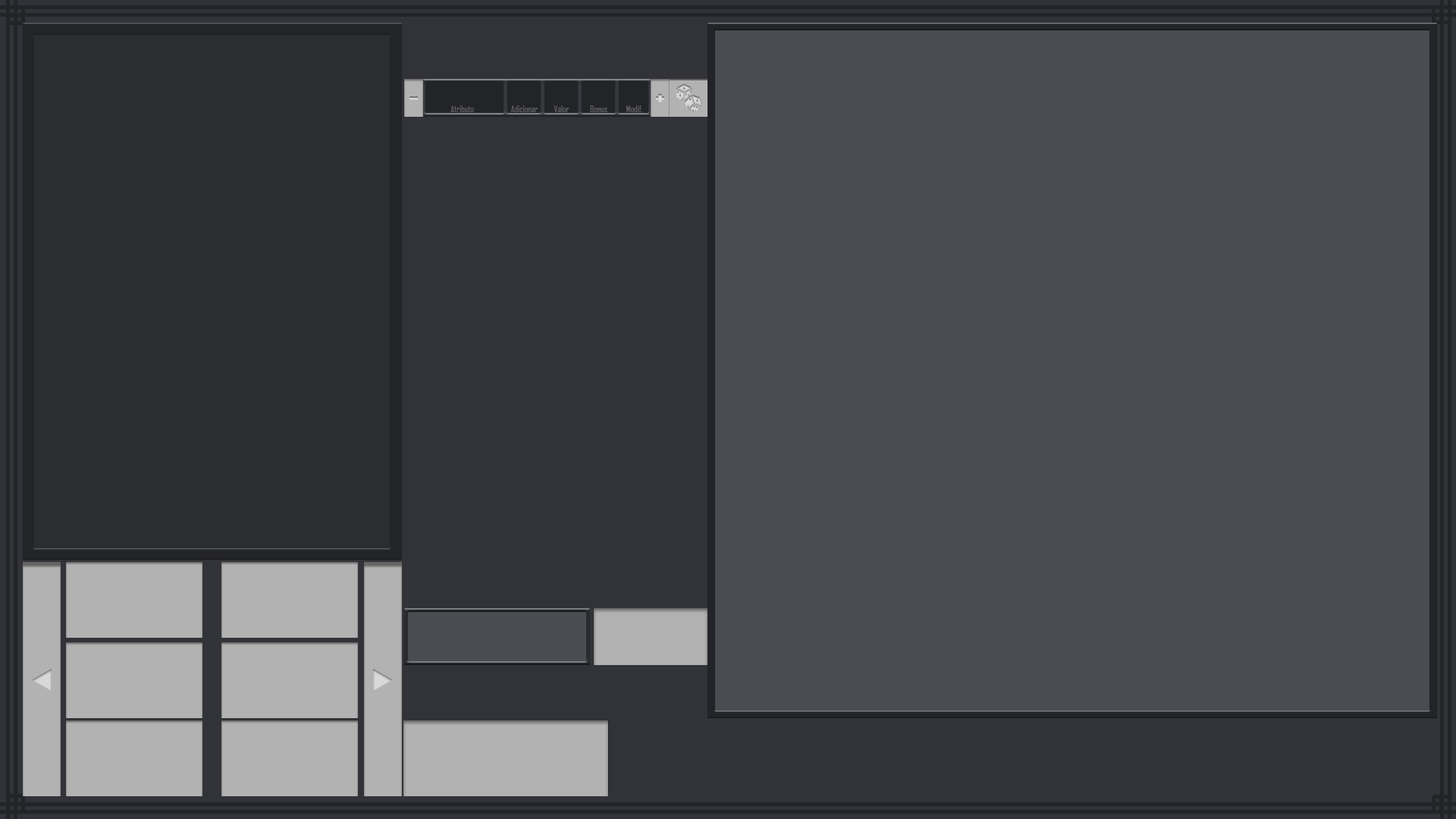
<style>
.page{position:relative;width:1456px;height:819px;background:#4a4c51}
.page>*{position:absolute;margin:0}
.t1{font:9.1px "AgencyFB-Reg";color:#616163}
</style>
<div class="page">
<p class="t1" style="left:450px;top:105px;width:24px;height:7px">Atributo</p>
<p class="t1" style="left:511px;top:105px;width:27px;height:7px">Adicionar</p>
<p class="t1" style="left:554px;top:105px;width:16px;height:7px">Valor</p>
<p class="t1" style="left:590px;top:105px;width:17px;height:7px">Bonus</p>
<p class="t1" style="left:626px;top:105px;width:16px;height:7px">Modif.</p>
</div>
